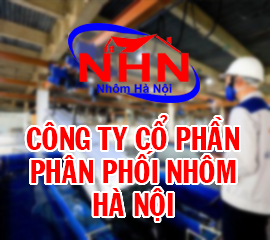
<style>
.page{position:relative;width:270px;height:240px}
.page>*{position:absolute;margin:0}
.t1{font:31px/33px "VNI-Franko";color:#ff0000;scale:0.88 1}
</style>
<div class="page">
<p class="t1" style="left:26px;top:115px;width:213px;height:106px;text-align:center">COÂNG TY COÅ PHAÀN PHAÂN PHOÁI NHOÂM HAØ NOÄI</p>
</div>
